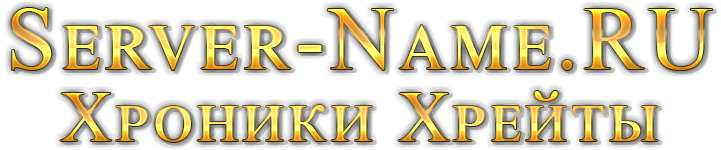
<style>
.page{position:relative;width:721px;height:150px;background:#ffffff}
.page>*{position:absolute;margin:0}
.t1{font:90px "TimesNewRomanPSMT";letter-spacing:0.05em;font-variant:small-caps}
.t2{font:72px "TimesNewRomanPSMT";letter-spacing:0.05em;font-variant:small-caps}
</style>
<div class="page">
<p class="t1" style="left:11px;top:8px;width:701px;height:62px">Server-Name.RU</p>
<p class="t2" style="left:60px;top:91px;width:598px;height:51px">Хроники Хрейты</p>
</div>
